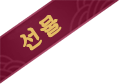
<style>
.page{position:relative;width:119px;height:84px;background:#ffffff}
.page>*{position:absolute;margin:0}
.t1{font:22px "SDKukdetopokki-aLt";letter-spacing:0.12em;color:#e3bb64;font-weight:bold}
</style>
<div class="page">
<p class="t1" style="left:20px;top:15px;width:42px;height:36px;rotate:-35deg">선물</p>
</div>
